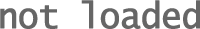
<style>
.page{position:relative;width:200px;height:29px;background:#ffffff}
.page>*{position:absolute;margin:0}
.t1{font:35.7px "LucidaConsole";letter-spacing:-0.05em;color:#666666;font-weight:bold}
</style>
<div class="page">
<p class="t1" style="left:0px;top:0px;width:201px;height:29px">not loaded</p>
</div>
